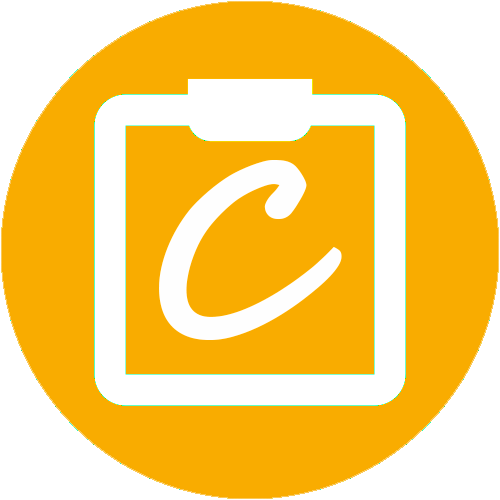
<style>
.page{position:relative;width:500px;height:500px;background:#f9ac00}
.page>*{position:absolute;margin:0}
.t1{font:233.3px "SegoeScript-Bold";color:#fefefe}
</style>
<div class="page">
<p class="t1" style="left:159px;top:160px;width:183px;height:180px">C</p>
</div>
